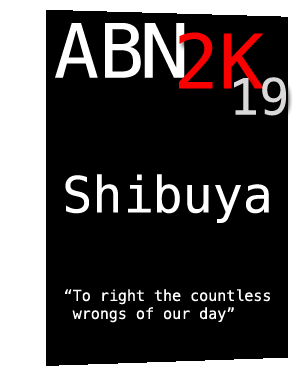
<style>
.page{position:relative;width:300px;height:375px;background:#000000}
.page>*{position:absolute;margin:0}
.t1{font:75px "Menlo-Regular";color:#ffffff}
.t2{font:75px "Menlo-Regular";color:#fb0000}
.t3{font:50px "Menlo-Regular";color:#dad8d8}
.t4{font:50px "Menlo-Regular";color:#ffffff}
.t5{font:15px "Menlo-Regular";color:#ffffff}
</style>
<div class="page">
<p class="t1" style="left:55px;top:23px;width:130px;height:55px">ABN</p>
<p class="t2" style="left:179px;top:32px;width:85px;height:57px">2K</p>
<p class="t3" style="left:234px;top:77px;width:52px;height:39px">19</p>
<p class="t4" style="left:65px;top:174px;width:204px;height:49px">Shibuya</p>
<p class="t5" style="left:65px;top:289px;width:205px;height:34px">“To right the countless <br> wrongs of our day”</p>
</div>
